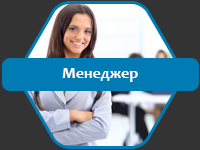
<style>
.page{position:relative;width:200px;height:150px;background:#333333}
.page>*{position:absolute;margin:0}
.t1{font:16px "Candara-Bold";color:#ffffff}
</style>
<div class="page">
<p class="t1" style="left:62px;top:68px;width:76px;height:14px">Менеджер</p>
</div>
